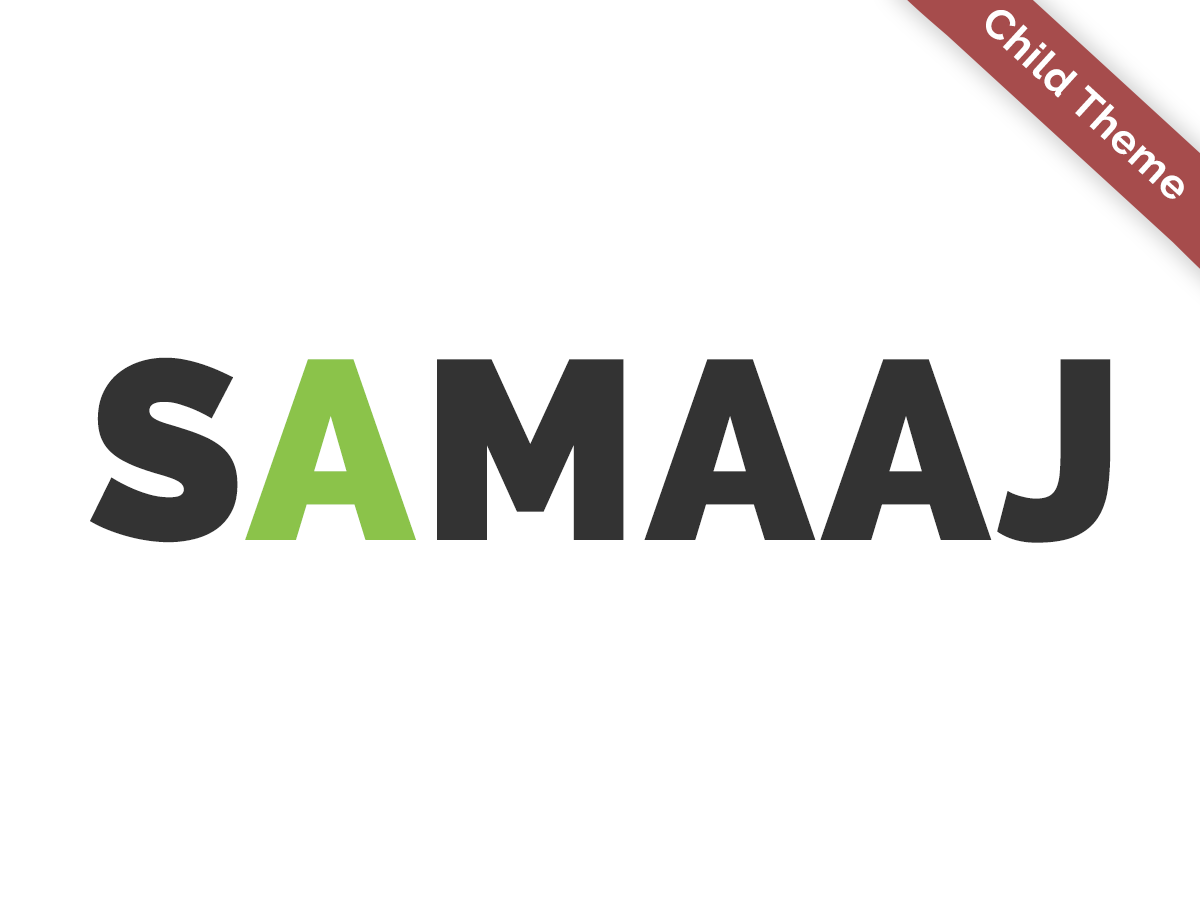
<style>
.page{position:relative;width:1200px;height:900px;background:#ffffff}
.page>*{position:absolute;margin:0}
.t1{font:254.4px "Raleway-Black";letter-spacing:0.025em;color:#333333}
.t2{font:254.4px "Raleway-Black";letter-spacing:0.025em;color:#8bc34a}
</style>
<div class="page">
<p class="t1" style="left:90px;top:357px;width:1021px;height:186px">S<span class="t2">A</span>MAAJ</p>
</div>
